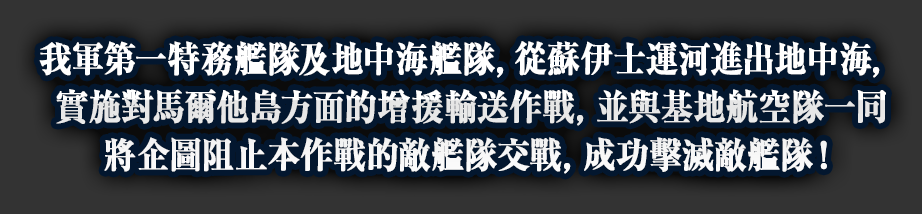
<style>
.page{position:relative;width:922px;height:214px;background:#03172f}
.page>*{position:absolute;margin:0}
.t1{font:36px/48px "RyuminPro-ExBold";color:#ffffff;font-weight:bold;scale:0.9 1}
</style>
<div class="page">
<p class="t1" style="left:39px;top:41px;width:847px;height:133px;text-align:center">我軍第一特務艦隊及地中海艦隊，從蘇伊士運河進出地中海，<br>實施對馬爾他島方面的增援輸送作戰，並與基地航空隊一同<br>將企圖阻止本作戰的敵艦隊交戰，成功擊滅敵艦隊！</p>
</div>
